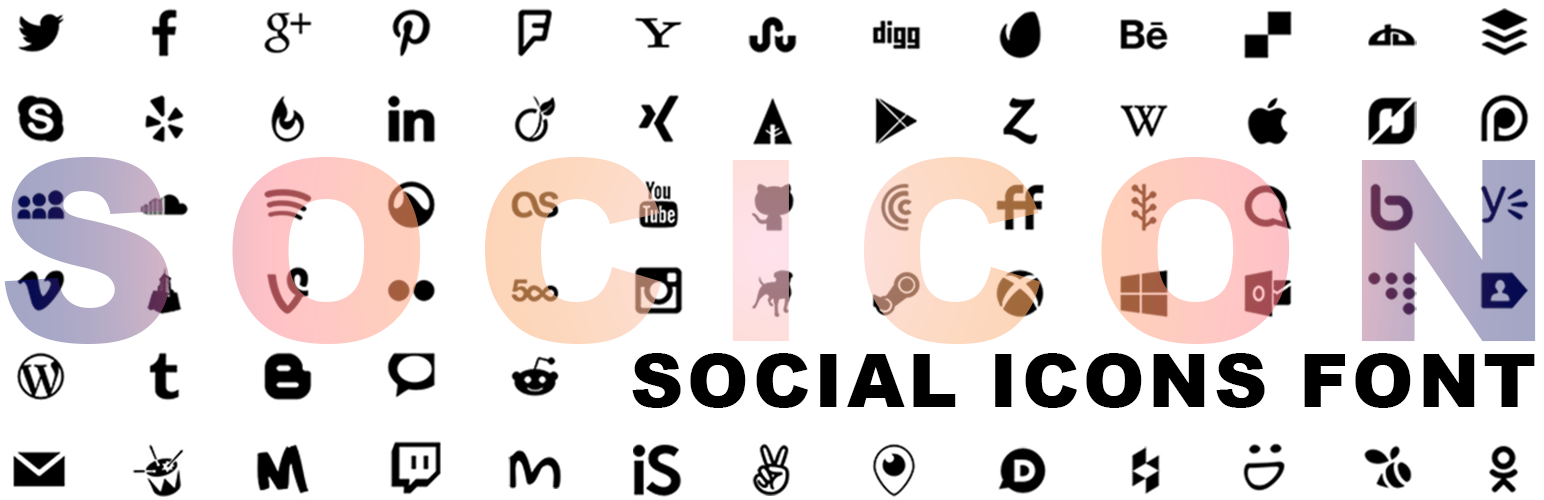
<style>
.page{position:relative;width:1544px;height:500px;background:#ffffff}
.page>*{position:absolute;margin:0}
.t1{font:253px "Arial-Black";letter-spacing:0.165em;text-transform:uppercase}
.t2{font:74px "Arial-Black";letter-spacing:0.05em;color:#000000;text-transform:uppercase}
</style>
<div class="page">
<p class="t1" style="left:4px;top:157px;width:1532px;height:187px">Socicon</p>
<p class="t2" style="left:632px;top:353px;width:903px;height:55px">Social icons font</p>
</div>
